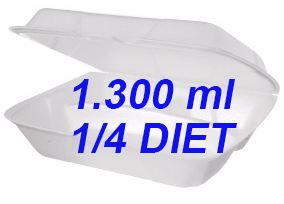
<style>
.page{position:relative;width:284px;height:204px;background:#fefefe}
.page>*{position:absolute;margin:0}
.t1{font:72px "Arial-BoldMT";color:#1111ea;font-style:italic}
</style>
<div class="page">
<p class="t1" style="left:73px;top:79px;width:162px;height:30px">1.300 ml</p>
<p class="t1" style="left:73px;top:123px;width:165px;height:30px">1/4 DIET</p>
</div>
